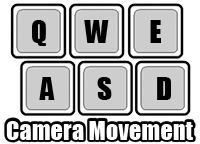
<style>
.page{position:relative;width:200px;height:144px;background:#ffffff}
.page>*{position:absolute;margin:0}
.t1{font:29.3px "Impact";color:#000000}
.t2{font:24.4px "Impact";color:#ffffff}
</style>
<div class="page">
<p class="t1" style="left:32px;top:20px;width:14px;height:26px">Q</p>
<p class="t1" style="left:84px;top:20px;width:25px;height:23px">W</p>
<p class="t1" style="left:150px;top:20px;width:11px;height:23px">E</p>
<p class="t1" style="left:39px;top:77px;width:16px;height:23px">A</p>
<p class="t1" style="left:97px;top:77px;width:15px;height:23px">S</p>
<p class="t1" style="left:157px;top:77px;width:14px;height:23px">D</p>
<p class="t2" style="left:6px;top:121px;width:187px;height:19px">Camera Movement</p>
</div>
